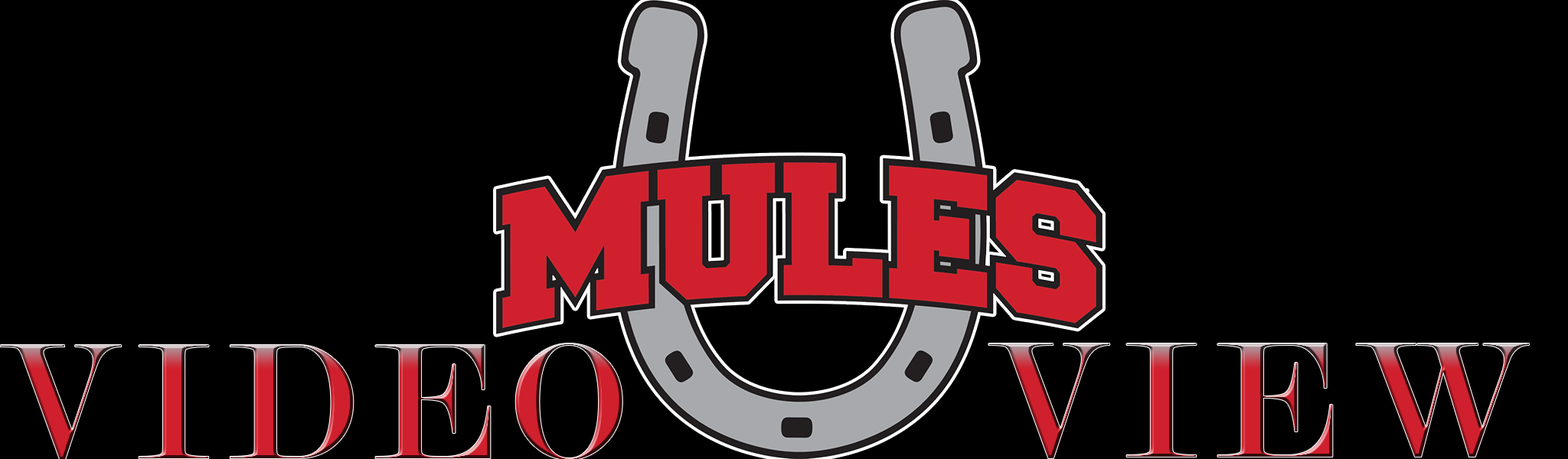
<style>
.page{position:relative;width:1568px;height:459px;background:#000000}
.page>*{position:absolute;margin:0}
.t1{font:176.1px "Modern-Regular";letter-spacing:0.1em}
</style>
<div class="page">
<p class="t1" style="left:0px;top:344px;width:622px;height:116px">VIDEO</p>
<p class="t1" style="left:988px;top:344px;width:541px;height:115px">VIEW</p>
</div>
